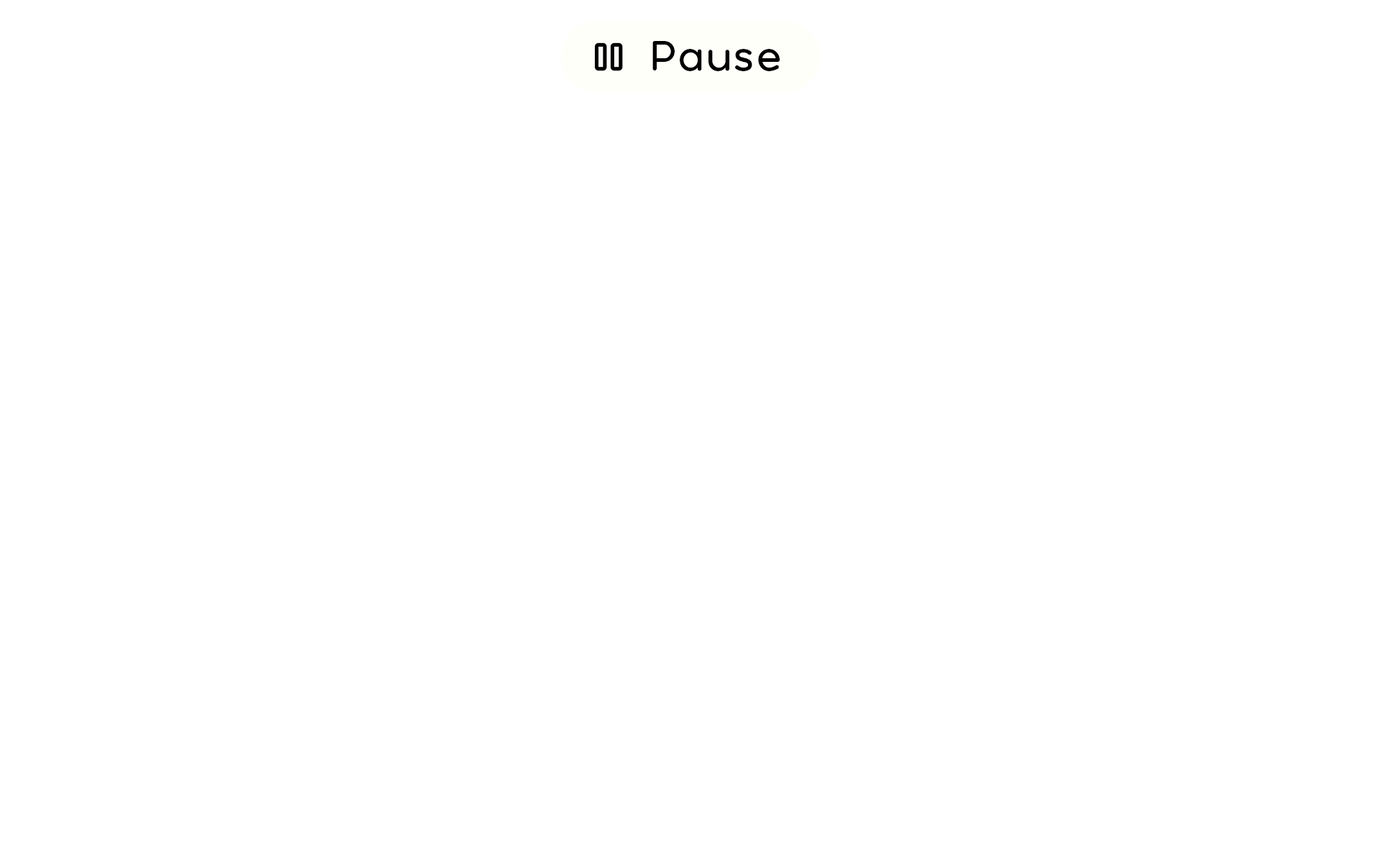
<style>
.page{position:relative;width:1381px;height:863px;background:#ffffff}
.page>*{position:absolute;margin:0}
.t1{font:43.2px "PollyRounded-Regular";color:#000000}
</style>
<div class="page">
<p class="t1" style="left:653px;top:41px;width:127px;height:30px">Pause</p>
</div>
